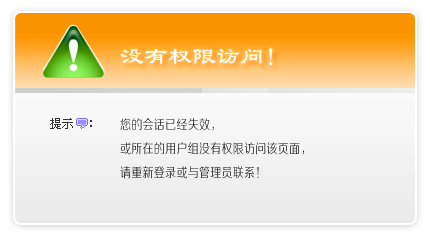
<style>
.page{position:relative;width:430px;height:240px}
.page>*{position:absolute;margin:0}
.t1{font:24px "LiSu";color:#fffcfe;text-transform:uppercase}
.t2{font:13.2px/24px "FZZXHJW--GB1-0";letter-spacing:0.025em;color:#141314;text-transform:uppercase;scale:0.83 1}
</style>
<div class="page">
<p class="t1" style="left:120px;top:48px;width:153px;height:17px">没有权限访问！</p>
<p class="t2" style="left:120px;top:118px;width:184px;height:61px">您的会话已经失效，<br>或所在的用户组没有权限访问该页面，<br>请重新登录或与管理员联系！</p>
</div>
